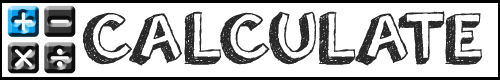
<style>
.page{position:relative;width:500px;height:80px;background:#ffffff}
.page>*{position:absolute;margin:0}
.t1{font:72.3px "orangejuice";letter-spacing:0.05em;color:#282828}
</style>
<div class="page">
<p class="t1" style="left:82px;top:11px;width:400px;height:55px">CALCULATE</p>
</div>
